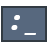
<style>
.page{position:relative;width:48px;height:48px;background:#57687e}
.page>*{position:absolute;margin:0}
.t1{font:28px "OpenSans-ExtraboldItalic";color:#ffffff}
.t2{font:28px "OpenSans-SemiboldItalic";color:#ffffff}
</style>
<div class="page">
<p class="t1" style="left:11px;top:15px;width:25px;height:20px">:<span class="t2"> _</span></p>
</div>
